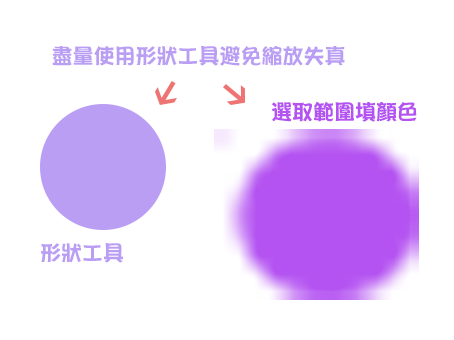
<style>
.page{position:relative;width:454px;height:340px;background:#ffffff}
.page>*{position:absolute;margin:0}
.t1{font:21px "DFPOP2-W9-WINP-BF";color:#ba9ef4}
.t2{font:21px "DFPOP2-W9-WINP-BF";color:#b453f1}
</style>
<div class="page">
<p class="t1" style="left:52px;top:45px;width:293px;height:21px">盡量使用形狀工具避免縮放失真</p>
<p class="t2" style="left:271px;top:101px;width:146px;height:21px">選取範圍填顏色</p>
<p class="t1" style="left:41px;top:243px;width:82px;height:20px">形狀工具</p>
</div>
